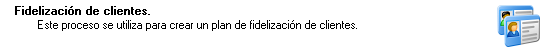
<style>
.page{position:relative;width:552px;height:52px;background:#ffffff}
.page>*{position:absolute;margin:0}
.t1{font:11.4px "MS Sans Serif";color:#000000;font-weight:bold}
.t2{font:11.4px "MS Sans Serif";color:#000000}
</style>
<div class="page">
<p class="t1" style="left:15px;top:6px;width:135px;height:9px">Fidelización de clientes.</p>
<p class="t2" style="left:38px;top:20px;width:319px;height:11px">Este proceso se utiliza para crear un plan de fidelización de clientes.</p>
</div>
